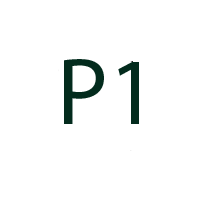
<style>
.page{position:relative;width:202px;height:202px;background:#ffffff}
.page>*{position:absolute;margin:0}
.t1{font:96px "MyriadHebrew-Regular";color:#032b1d}
</style>
<div class="page">
<p class="t1" style="left:64px;top:59px;width:75px;height:65px">P1</p>
</div>
